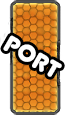
<style>
.page{position:relative;width:66px;height:115px;background:#ffffff}
.page>*{position:absolute;margin:0}
.t1{font:28.2px "Junegull";color:#ffffff}
</style>
<div class="page">
<p class="t1" style="left:3px;top:35px;width:59px;height:42px;rotate:30deg">PORT</p>
</div>
